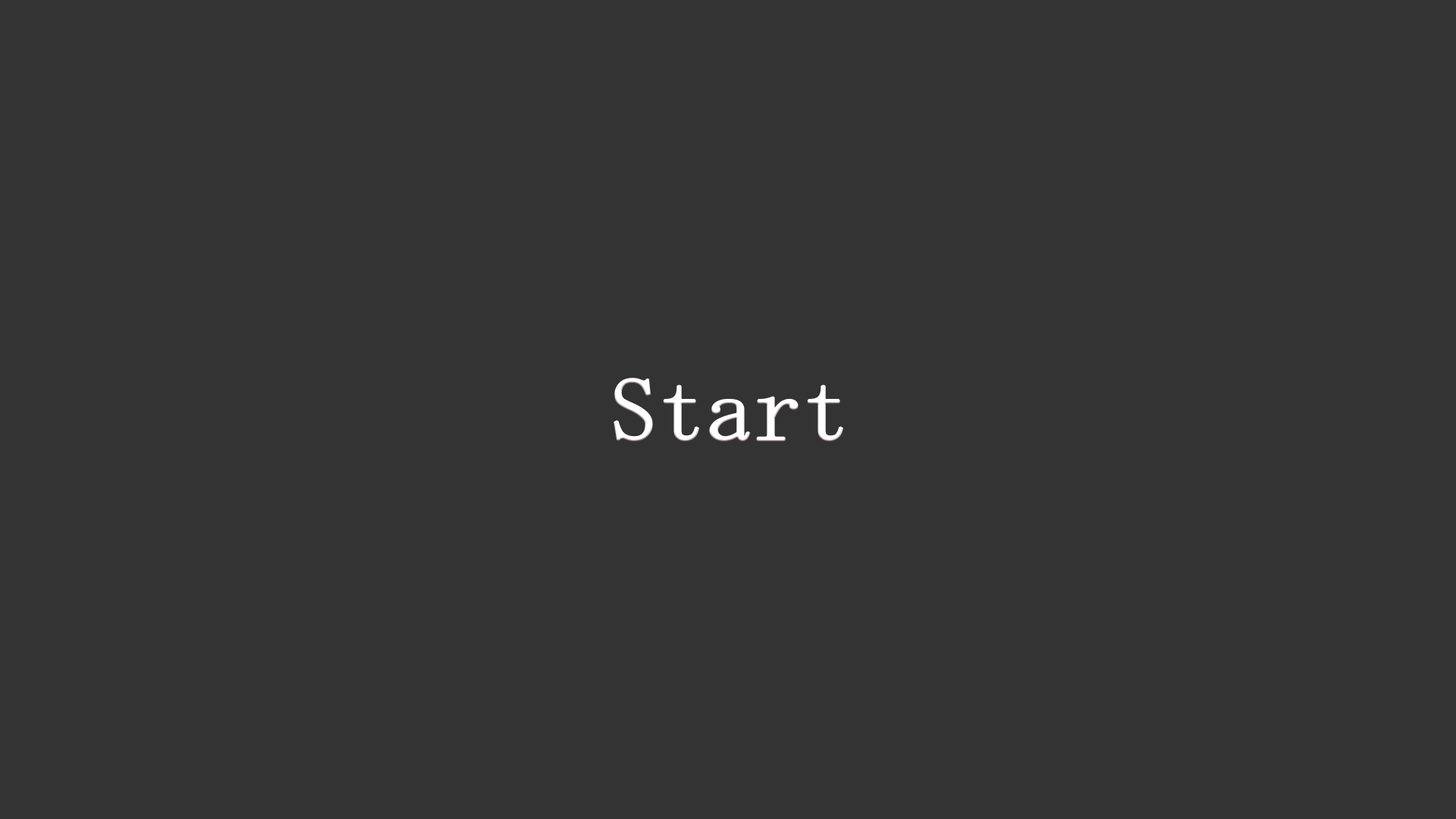
<style>
.page{position:relative;width:1456px;height:819px;background:#333333}
.page>*{position:absolute;margin:0}
.t1{font:91px "MS-Mincho";color:#ffffff;font-weight:bold}
</style>
<div class="page">
<p class="t1" style="left:613px;top:378px;width:230px;height:63px">Start</p>
</div>
